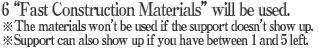
<style>
.page{position:relative;width:318px;height:48px;background:#ffffff}
.page>*{position:absolute;margin:0}
.t1{font:14px/14px "RyuminPro-ExBold";letter-spacing:-0.08em;scale:0.9 1}
.t2{font:18px/18px "RyuminPro-ExBold";letter-spacing:-0.08em;scale:0.9 1}
.t3{font:14px/14px "TimesNewRomanPSMT";scale:0.9 1}
.t4{font:14px/18px "TimesNewRomanPSMT";scale:0.9 1}
.t5{font:14px/18px "RyuminPro-ExBold";letter-spacing:-0.08em;scale:0.9 1}
</style>
<div class="page">
<p class="t1" style="left:1px;top:0px;width:313px;height:47px"><span class="t2">6 “Fast Construction Materials” will be used.<br></span><span class="t3">※</span>The materials won’t be used if the support doesn’t show up.<br><span class="t4">※</span><span class="t5">Support can also show up if you have between 1 and 5 left.</span></p>
</div>
